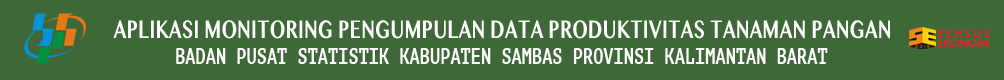
<style>
.page{position:relative;width:1004px;height:80px;background:#3f6838}
.page>*{position:absolute;margin:0}
.t1{font:25px "GurmukhiMN-Bold";color:#ffffff;scale:0.7 1}
.t2{font:21.6px "PTMono-Bold";color:#ffffff;scale:0.79 1}
</style>
<div class="page">
<p class="t1" style="left:113px;top:20px;width:777px;height:19px">APLIKASI MONITORING PENGUMPULAN DATA PRODUKTIVITAS TANAMAN PANGAN</p>
<p class="t2" style="left:176px;top:48px;width:652px;height:16px">BADAN PUSAT STATISTIK KABUPATEN SAMBAS PROVINSI KALIMANTAN BARAT</p>
</div>
